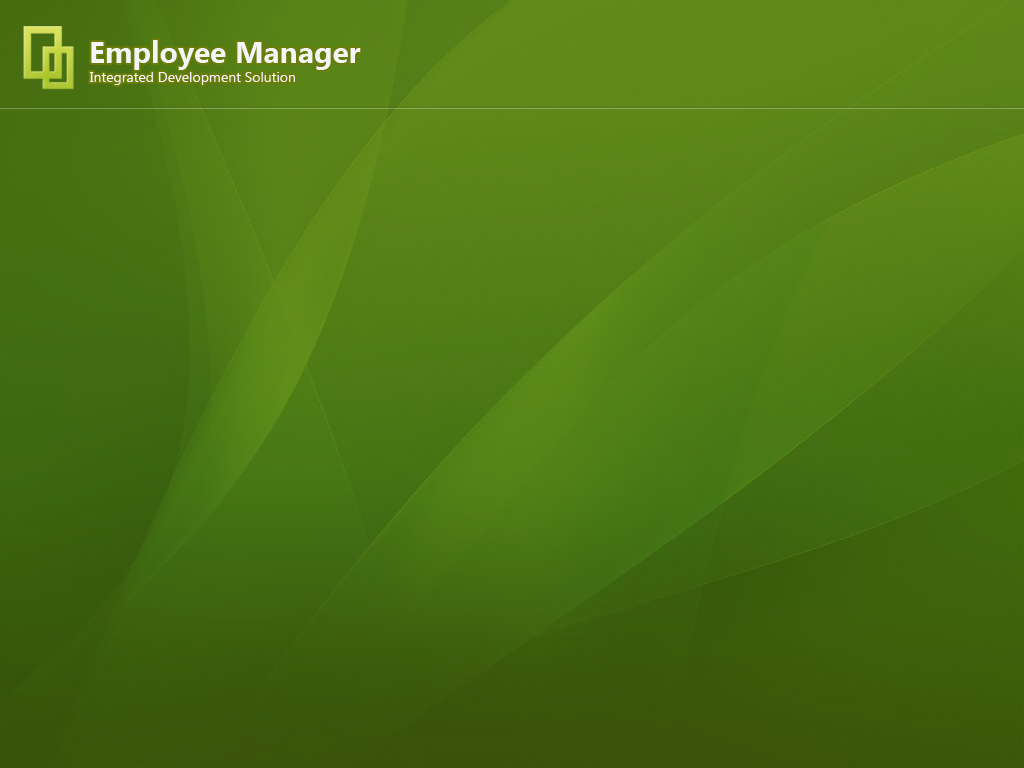
<style>
.page{position:relative;width:1024px;height:768px}
.page>*{position:absolute;margin:0}
.t1{font:30px "SegoeUI-Bold";color:#f4f5f8}
.t2{font:14px "SegoeUI";color:#f4f5f8}
</style>
<div class="page">
<p class="t1" style="left:91px;top:40px;width:270px;height:30px">Employee Manager</p>
<p class="t2" style="left:90px;top:72px;width:205px;height:13px">Integrated Development Solution</p>
</div>
